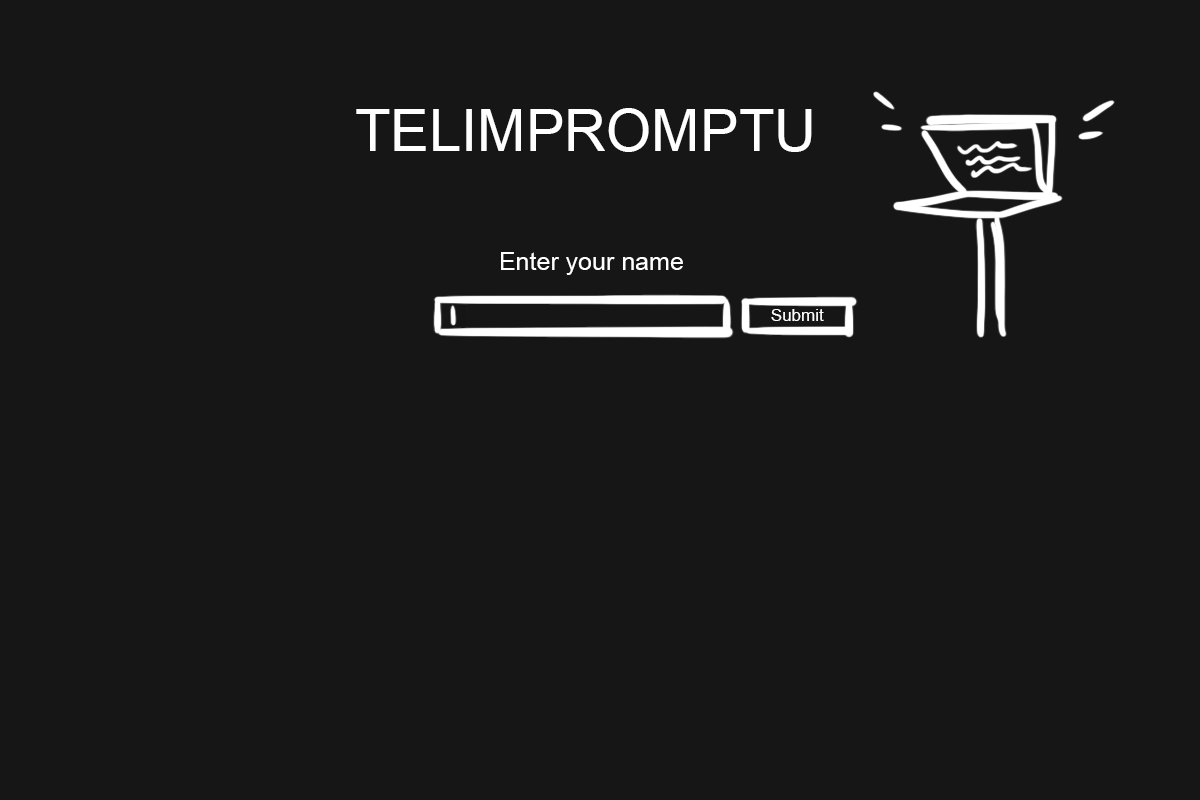
<style>
.page{position:relative;width:1200px;height:800px;background:#161616}
.page>*{position:absolute;margin:0}
.t1{font:58px "ArialMT";color:#ffffff}
.t2{font:25px "ArialMT";color:#ffffff}
.t3{font:17px "ArialMT";color:#ffffff}
</style>
<div class="page">
<p class="t1" style="left:356px;top:108px;width:456px;height:44px">TELIMPROMPTU</p>
<p class="t2" style="left:501px;top:252px;width:182px;height:23px">Enter your name</p>
<p class="t3" style="left:771px;top:309px;width:53px;height:12px">Submit</p>
</div>
